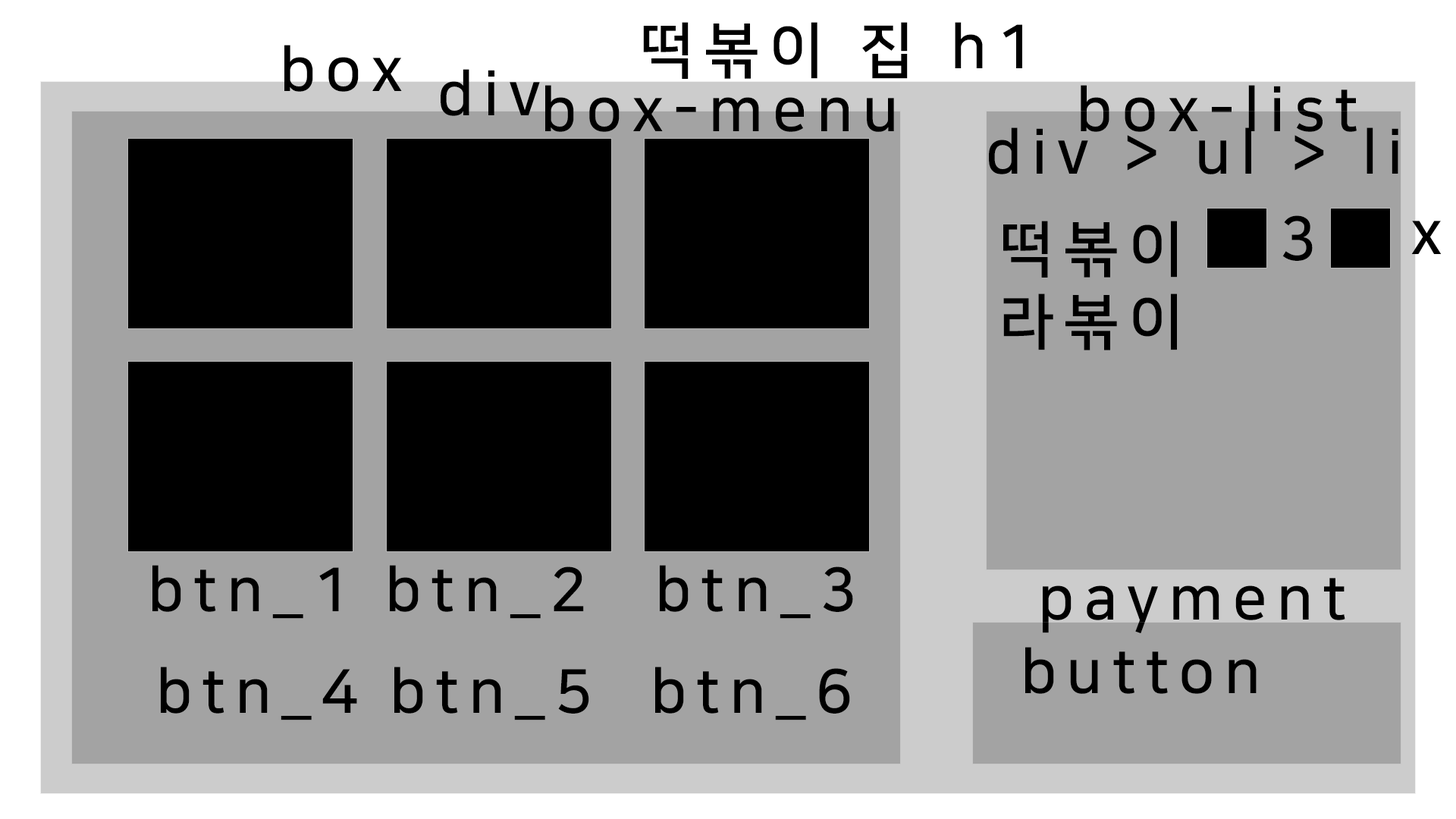
<style>
.page{position:relative;width:1456px;height:819px;background:#a3a3a3}
.page>*{position:absolute;margin:0}
.t1{font:60.7px "NanumSquareB";letter-spacing:0.16em;color:#000000}
</style>
<div class="page">
<p class="t1" style="left:643px;top:22px;width:265px;height:57px">떡볶이 집</p>
<p class="t1" style="left:955px;top:22px;width:67px;height:46px">h1</p>
<p class="t1" style="left:284px;top:45px;width:118px;height:47px">box</p>
<p class="t1" style="left:441px;top:69px;width:99px;height:47px">div</p>
<p class="t1" style="left:545px;top:85px;width:349px;height:47px">box-menu</p>
<p class="t1" style="left:1081px;top:85px;width:276px;height:47px">box-list</p>
<p class="t1" style="left:989px;top:127px;width:409px;height:47px">div &gt; ul &gt; li</p>
<p class="t1" style="left:1003px;top:221px;width:174px;height:129px;text-align:center">떡볶이<br>라볶이</p>
<p class="t1" style="left:1282px;top:215px;width:31px;height:46px">3</p>
<p class="t1" style="left:1411px;top:221px;width:31px;height:33px">x</p>
<p class="t1" style="left:152px;top:565px;width:187px;height:54px">btn_1</p>
<p class="t1" style="left:390px;top:565px;width:194px;height:54px">btn_2</p>
<p class="t1" style="left:660px;top:565px;width:193px;height:54px">btn_3</p>
<p class="t1" style="left:1043px;top:578px;width:302px;height:55px">payment</p>
<p class="t1" style="left:1025px;top:647px;width:232px;height:47px">button</p>
<p class="t1" style="left:161px;top:667px;width:196px;height:53px">btn_4</p>
<p class="t1" style="left:394px;top:667px;width:195px;height:53px">btn_5</p>
<p class="t1" style="left:655px;top:667px;width:195px;height:53px">btn_6</p>
</div>
